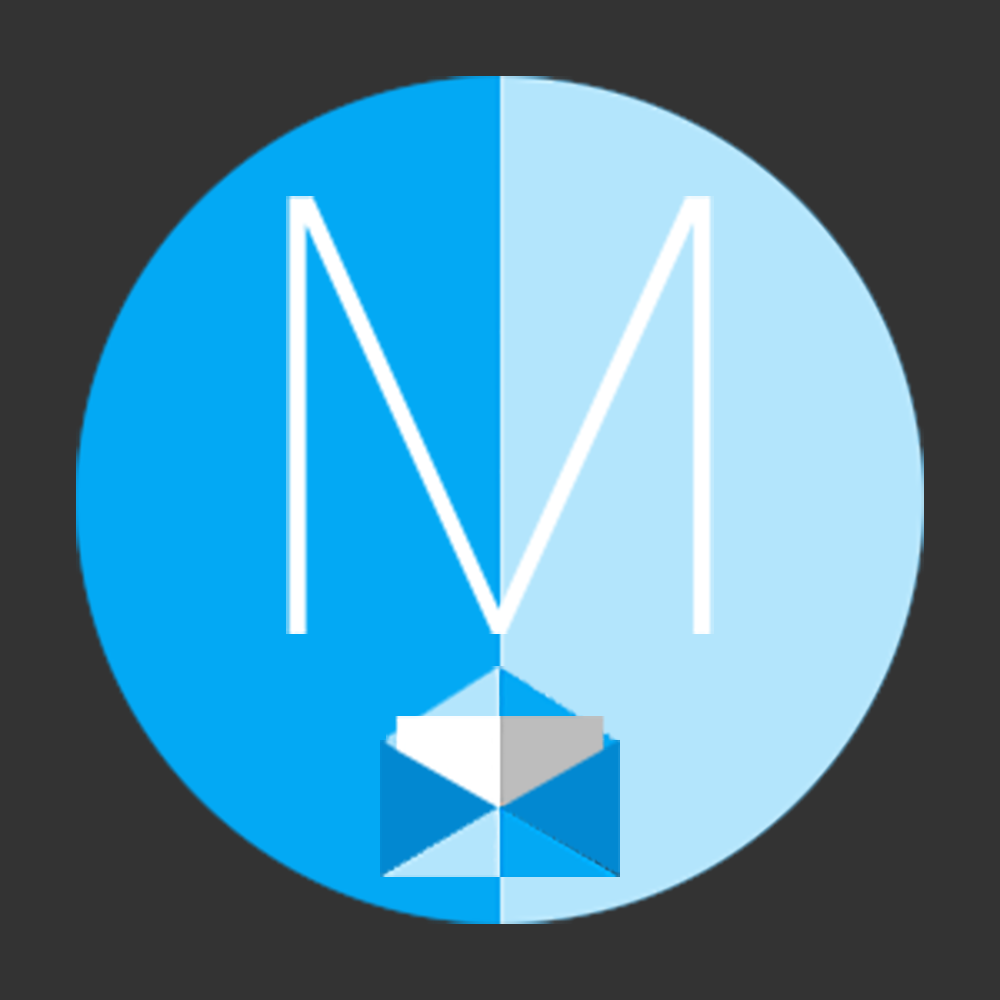
<style>
.page{position:relative;width:1000px;height:1000px;background:#333333}
.page>*{position:absolute;margin:0}
.t1{font:612.5px "Roboto-Thin";color:#ffffff;scale:1.04 1}
</style>
<div class="page">
<p class="t1" style="left:286px;top:196px;width:428px;height:438px">M</p>
</div>
